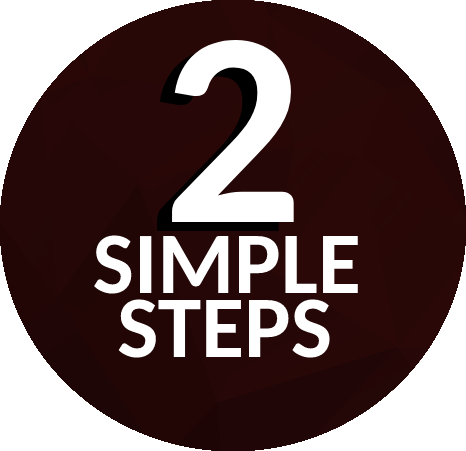
<style>
.page{position:relative;width:466px;height:451px;background:#ffffff}
.page>*{position:absolute;margin:0}
.t1{font:277.4px "Carlito-Bold";color:#ffffff}
.t2{font:87.8px "Carlito-Bold";color:#ffffff}
</style>
<div class="page">
<p class="t1" style="left:172px;top:40px;width:122px;height:182px">2</p>
<p class="t2" style="left:94px;top:235px;width:264px;height:59px">SIMPLE</p>
<p class="t2" style="left:118px;top:299px;width:212px;height:59px">STEPS</p>
</div>
